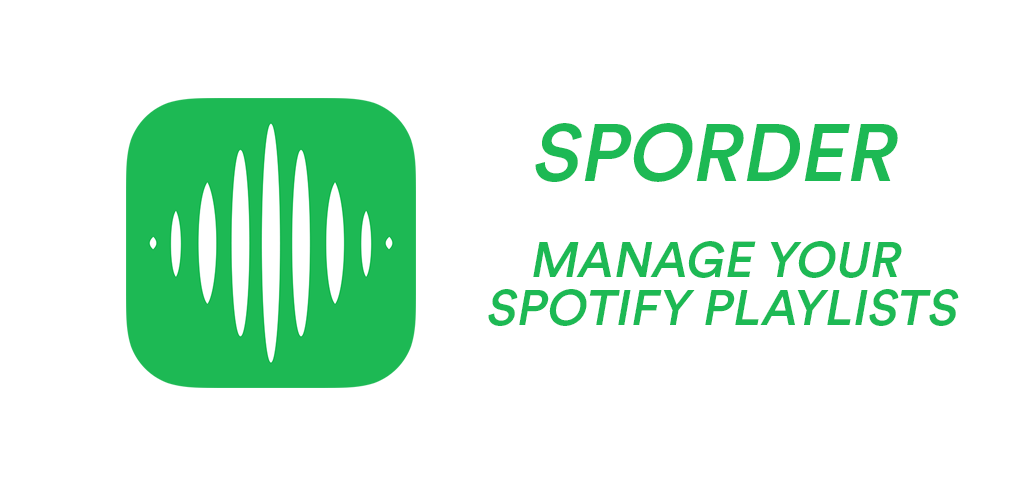
<style>
.page{position:relative;width:1024px;height:500px;background:#ffffff}
.page>*{position:absolute;margin:0}
.t1{font:80px "CircularStd-Medium";color:#1db954;font-style:italic}
.t2{font:50px/48px "CircularStd-Medium";color:#1db954;font-style:italic}
</style>
<div class="page">
<p class="t1" style="left:535px;top:123px;width:363px;height:59px">SPORDER</p>
<p class="t2" style="left:488px;top:241px;width:471px;height:85px;text-align:center">MANAGE YOUR<br> SPOTIFY PLAYLISTS</p>
</div>
